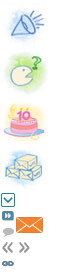
<style>
.page{position:relative;width:70px;height:275px;background:#ffffff}
.page>*{position:absolute;margin:0}
.t1{font:24px "KGRayofSunshine";letter-spacing:-0.1em;color:#979797;scale:0.51 1}
</style>
<div class="page">
<p class="t1" style="left:2px;top:242px;width:11px;height:11px">&lt;&lt;</p>
<p class="t1" style="left:19px;top:242px;width:11px;height:11px;rotate:180deg">&lt;&lt;</p>
</div>
